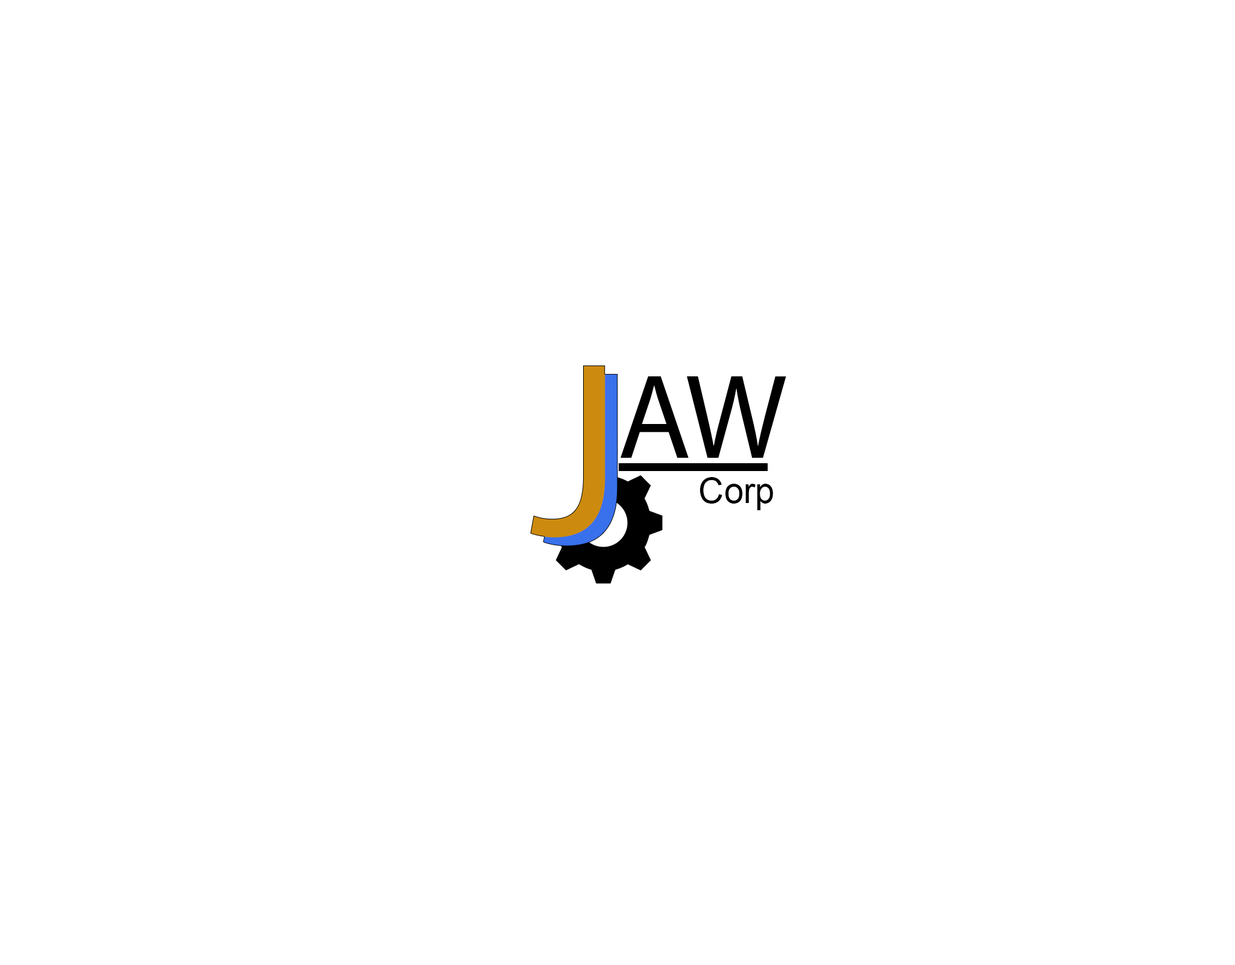
<style>
.page{position:relative;width:1235px;height:965px;background:#ffffff}
.page>*{position:absolute;margin:0}
.t1{font:120.6px "MyriadPro-Regular";color:#000000}
.t2{font:35.2px "ArialMT";color:#000000}
</style>
<div class="page">
<p class="t1" style="left:621px;top:376px;width:166px;height:82px">AW</p>
<p class="t2" style="left:700px;top:477px;width:73px;height:33px">Corp</p>
</div>
